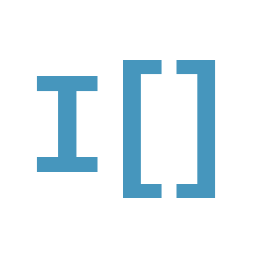
<style>
.page{position:relative;width:256px;height:256px;background:#ffffff}
.page>*{position:absolute;margin:0}
.t1{font:150px "AbletonSansSmall-Bold";color:#4696bd}
.t2{font:150px "Consolas-Bold";color:#4696bd}
</style>
<div class="page">
<p class="t1" style="left:36px;top:60px;width:180px;height:138px"><span class="t2">I</span>[]</p>
</div>
